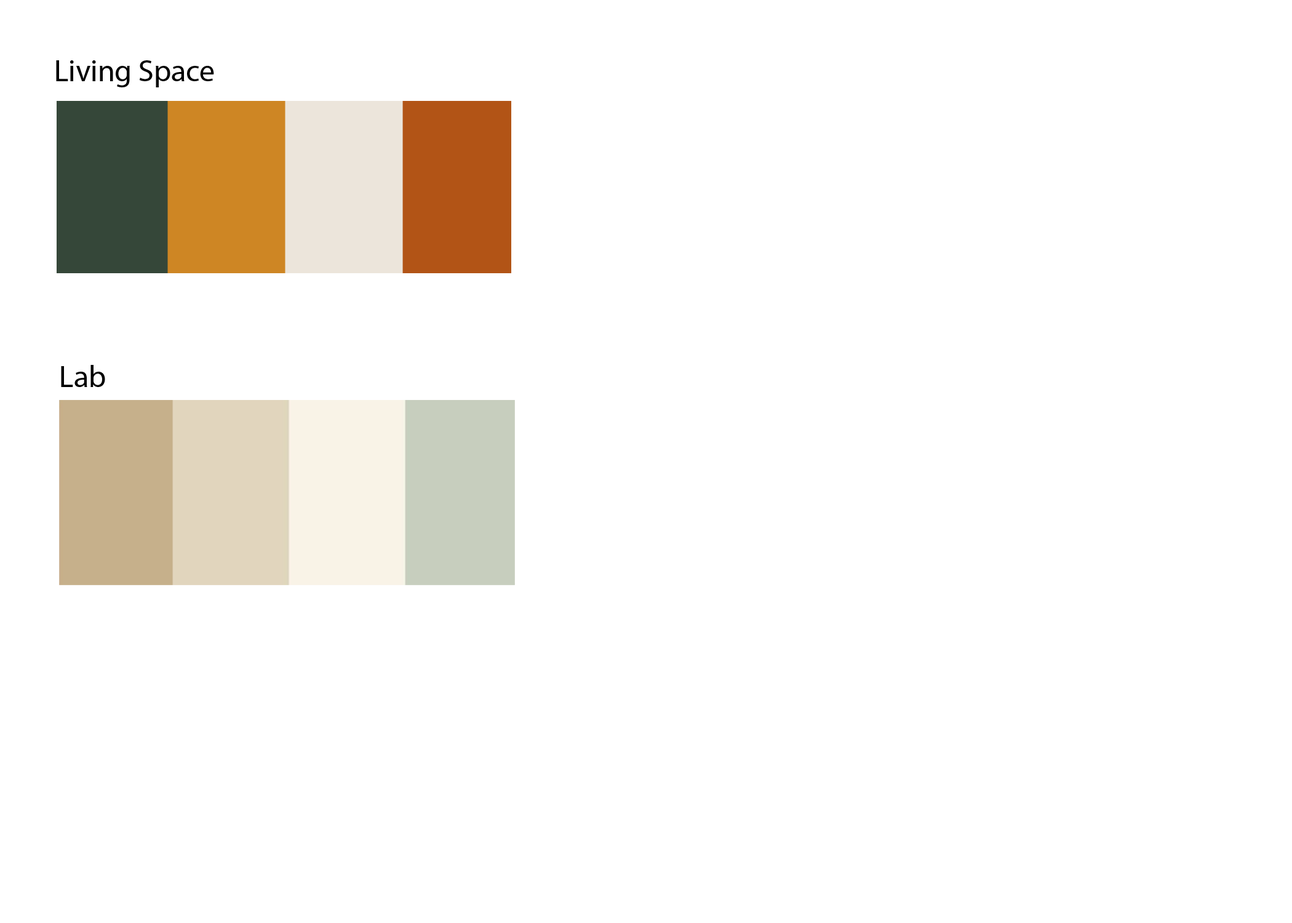
<style>
.page{position:relative;width:1292px;height:923px;background:#ffffff}
.page>*{position:absolute;margin:0}
.t1{font:30.8px "MyriadPro-Regular";color:#000000}
</style>
<div class="page">
<p class="t1" style="left:56px;top:60px;width:158px;height:27px">Living Space</p>
<p class="t1" style="left:61px;top:365px;width:44px;height:22px">Lab</p>
</div>
